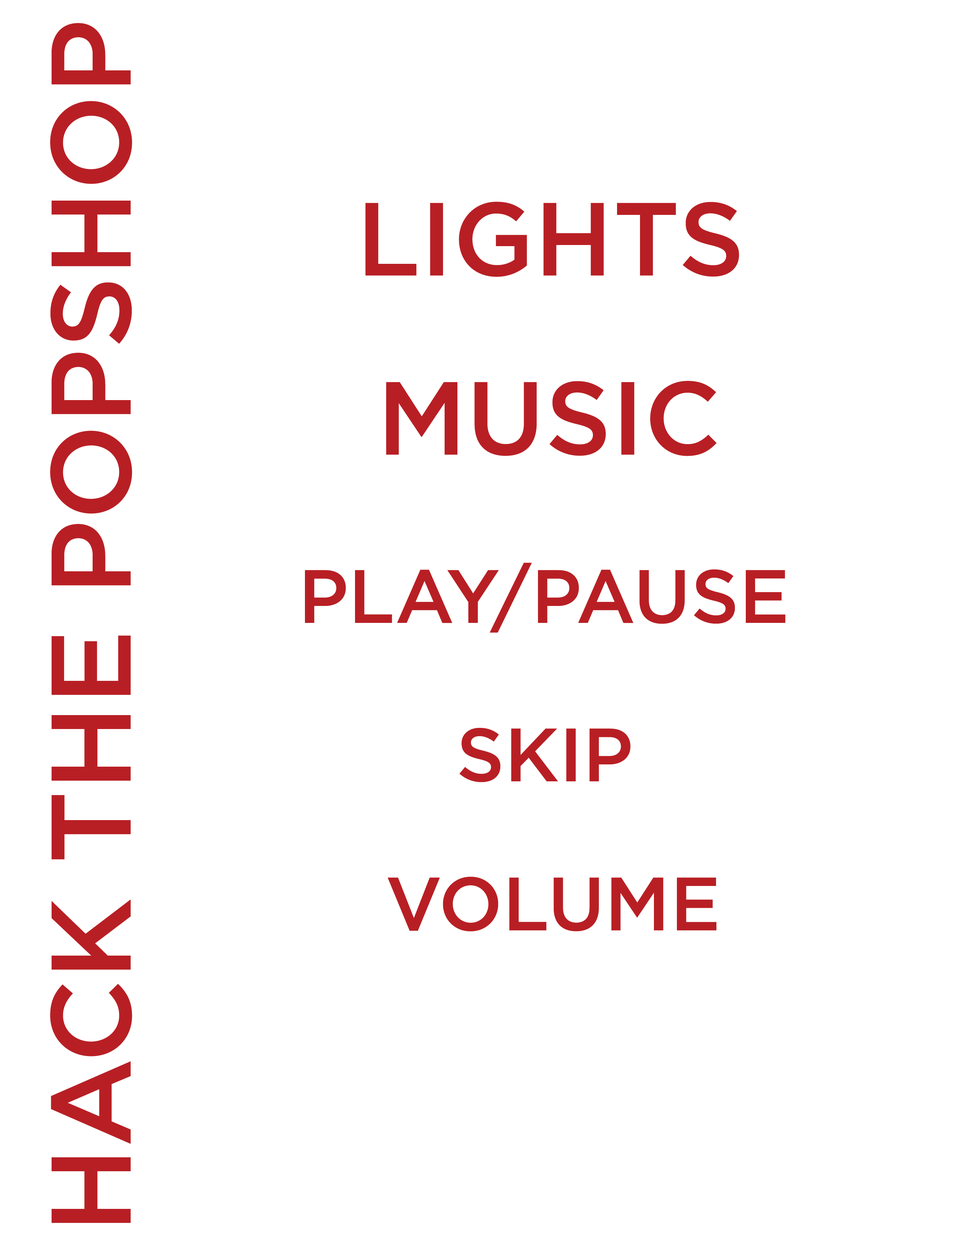
<style>
.page{position:relative;width:960px;height:1242px;background:#ffffff}
.page>*{position:absolute;margin:0}
.t1{font:112.9px "Gotham-Medium";color:#b81f24;text-transform:uppercase}
.t2{font:103.5px "Gotham-Medium";color:#b81f24;text-transform:uppercase}
.t3{font:75.3px "Gotham-Medium";color:#b81f24;text-transform:uppercase}
</style>
<div class="page">
<p class="t1" style="left:50px;top:23px;width:82px;height:1200px;rotate:-90deg">Hack the PopShop</p>
<p class="t2" style="left:365px;top:202px;width:374px;height:75px">Lights</p>
<p class="t2" style="left:386px;top:381px;width:331px;height:75px">MUSIC</p>
<p class="t3" style="left:305px;top:563px;width:480px;height:70px">Play/Pause</p>
<p class="t3" style="left:459px;top:728px;width:172px;height:55px">Skip</p>
<p class="t3" style="left:388px;top:877px;width:328px;height:55px">VolumE</p>
</div>
